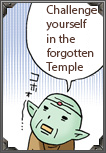
<style>
.page{position:relative;width:106px;height:153px;background:#ffffff}
.page>*{position:absolute;margin:0}
.t1{font:12px "MyriadPro-Regular";color:#5b3b30}
</style>
<div class="page">
<p class="t1" style="left:46px;top:5px;width:51px;height:69px">Challenge<br>yourself<br>in the<br>forgotten<br>Temple</p>
</div>
